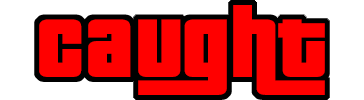
<style>
.page{position:relative;width:364px;height:100px;background:#ff0000}
.page>*{position:absolute;margin:0}
.t1{font:90px "PricedownBl-Regular";letter-spacing:0.03em;color:#ff0000}
</style>
<div class="page">
<p class="t1" style="left:39px;top:5px;width:286px;height:90px">caught</p>
</div>
